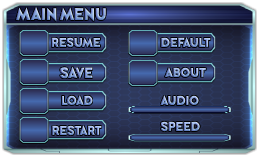
<style>
.page{position:relative;width:259px;height:157px}
.page>*{position:absolute;margin:0}
.t1{font:17px "PerfectlyTogether"}
.t2{font:13px "PerfectlyTogether"}
.t3{font:15px "PerfectlyTogether"}
</style>
<div class="page">
<p class="t1" style="left:16px;top:6px;width:90px;height:16px">Main Menu</p>
<p class="t2" style="left:51px;top:37px;width:49px;height:11px">Resume</p>
<p class="t2" style="left:161px;top:36px;width:50px;height:12px">Default</p>
<p class="t3" style="left:60px;top:66px;width:33px;height:14px">Save</p>
<p class="t2" style="left:164px;top:66px;width:42px;height:12px">About</p>
<p class="t2" style="left:61px;top:94px;width:32px;height:12px">Load</p>
<p class="t2" style="left:160px;top:94px;width:39px;height:12px">Audio</p>
<p class="t2" style="left:52px;top:124px;width:50px;height:12px">Restart</p>
<p class="t2" style="left:160px;top:121px;width:40px;height:11px">Speed</p>
</div>
